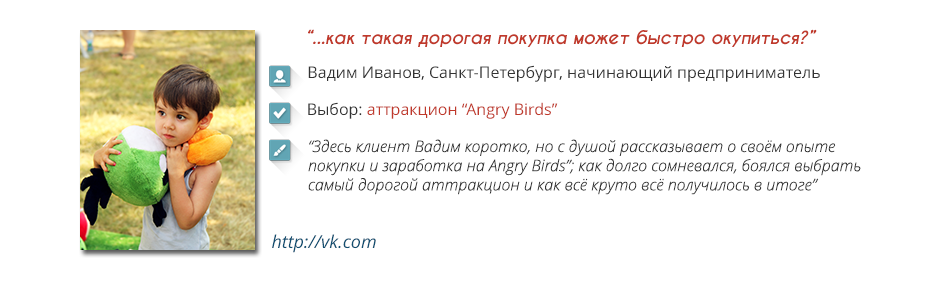
<style>
.page{position:relative;width:940px;height:300px;background:#ffffff}
.page>*{position:absolute;margin:0}
.t1{font:18px "CaviarDreams-BoldItalic";color:#c0392b}
.t2{font:16px "OpenSans";color:#333333}
.t3{font:16px "OpenSans";color:#c0392b}
.t4{font:16px "OpenSansLight-Italic";color:#333333}
.t5{font:18px "OpenSans-Italic";color:#114f71}
</style>
<div class="page">
<p class="t1" style="left:308px;top:29px;width:509px;height:18px">“...как такая дорогая покупка может быстро окупиться?”</p>
<p class="t2" style="left:308px;top:65px;width:512px;height:17px">Вадим Иванов, Санкт-Петербург, начинающий предприниматель</p>
<p class="t3" style="left:308px;top:102px;width:250px;height:17px"><span class="t2">Выбор: </span>аттракцион “Angry Birds”</p>
<p class="t4" style="left:308px;top:139px;width:553px;height:56px">“Здесь клиент Вадим коротко, но с душой рассказывает о своём опыте <br>покупки и заработка на Angry Birds”; как долго сомневался, боялся выбрать <br>самый дорогой аттракцион и как всё круто всё получилось в итоге”</p>
<p class="t5" style="left:272px;top:234px;width:104px;height:19px">http://vk.com</p>
</div>
